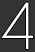
<style>
.page{position:relative;width:35px;height:52px;background:#333333}
.page>*{position:absolute;margin:0}
.t1{font:55px "Steiner";color:#ffffff}
</style>
<div class="page">
<p class="t1" style="left:1px;top:2px;width:32px;height:47px">4</p>
</div>
